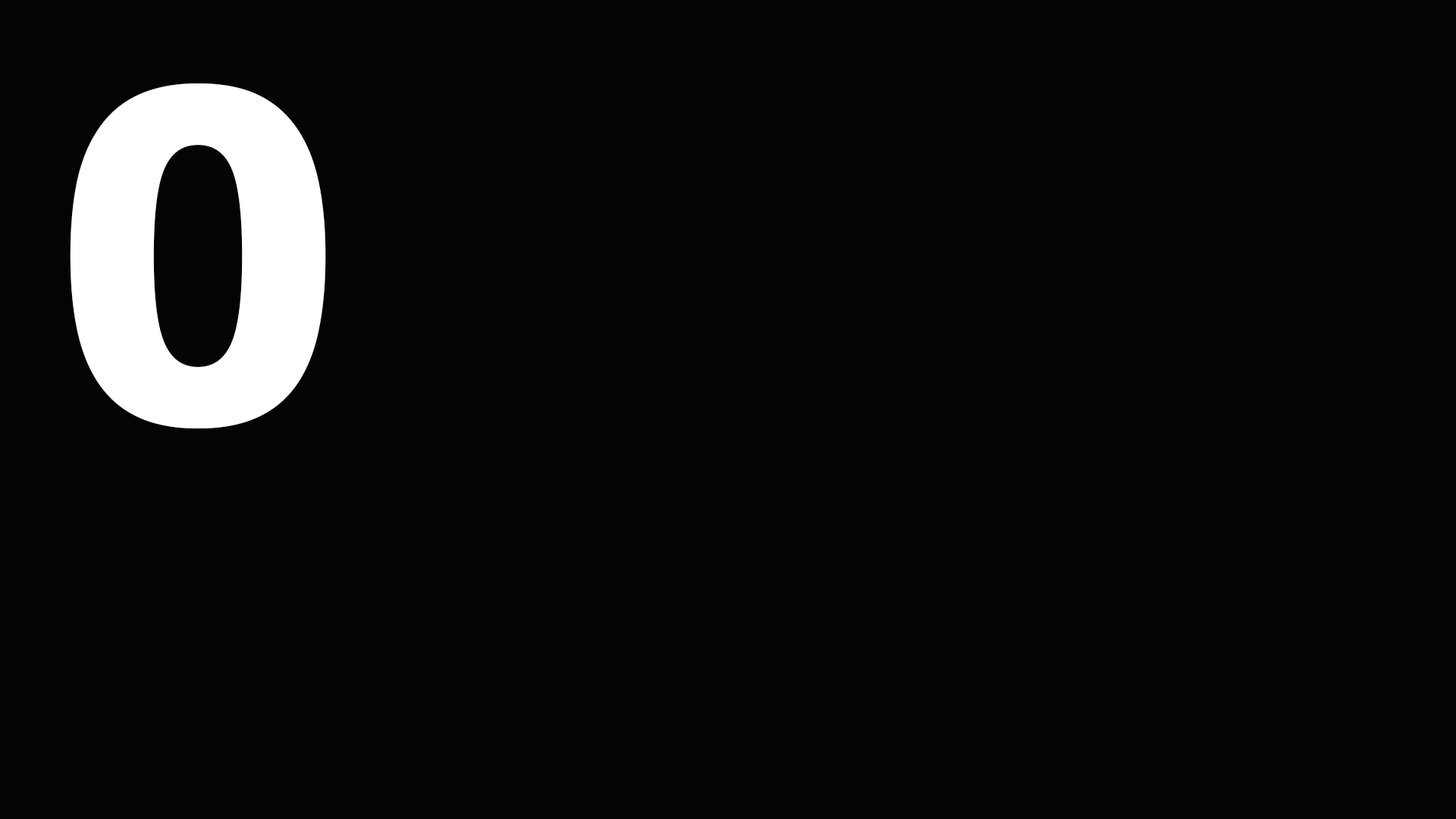
<style>
.page{position:relative;width:1456px;height:819px;background:#040404}
.page>*{position:absolute;margin:0}
.t1{font:455px "Tahoma-Bold";color:#ffffff}
</style>
<div class="page">
<p class="t1" style="left:70px;top:83px;width:256px;height:345px">0</p>
</div>
